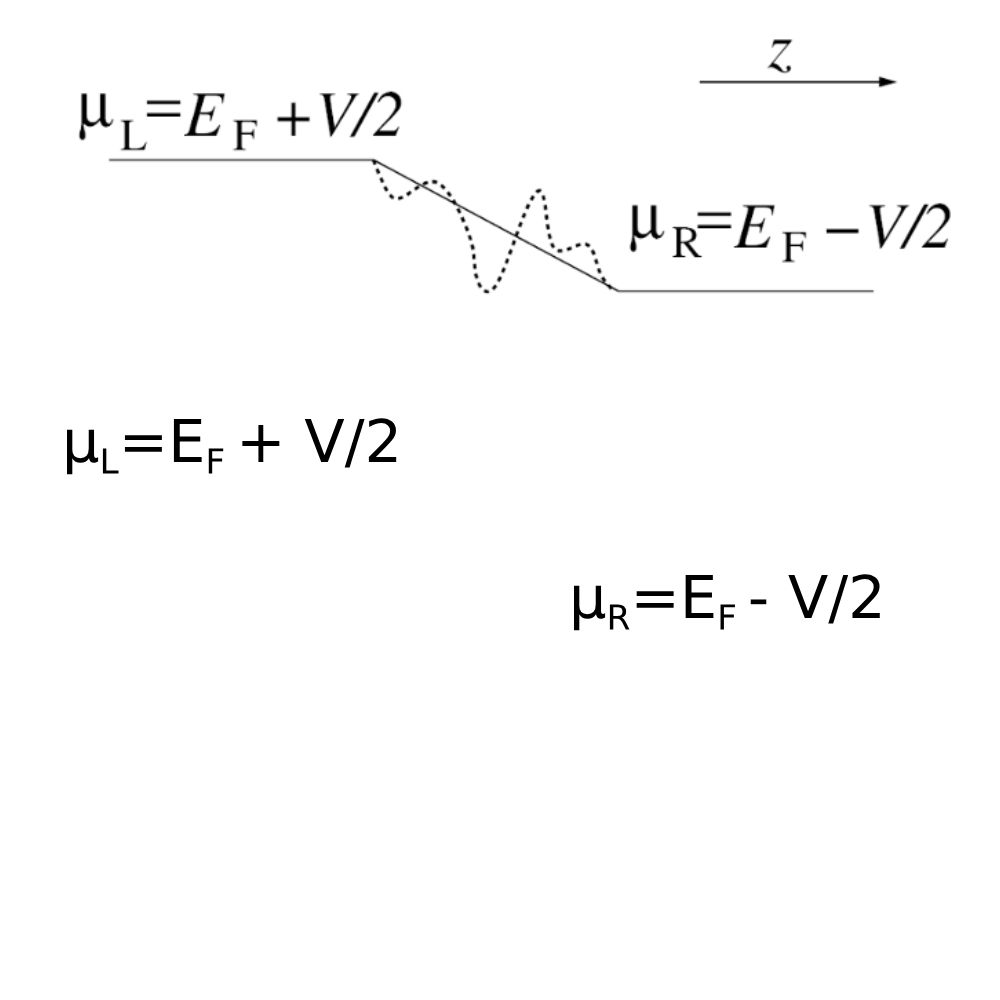
<style>
.page{position:relative;width:1000px;height:1000px;background:#ffffff}
.page>*{position:absolute;margin:0}
.t1{font:59px "DejaVuSans";color:#000000}
</style>
<div class="page">
<p class="t1" style="left:67px;top:418px;width:330px;height:57px">μL=EF + V/2</p>
<p class="t1" style="left:574px;top:574px;width:306px;height:57px">μR=EF - V/2</p>
</div>
